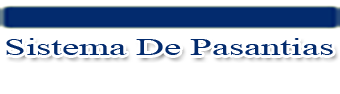
<style>
.page{position:relative;width:340px;height:94px;background:#ffffff}
.page>*{position:absolute;margin:0}
.t1{font:24px "TimesNewRomanPSMT";color:#032b6e;scale:1.6 1}
</style>
<div class="page">
<p class="t1" style="left:6px;top:38px;width:327px;height:17px">Sistema De Pasantias</p>
</div>
